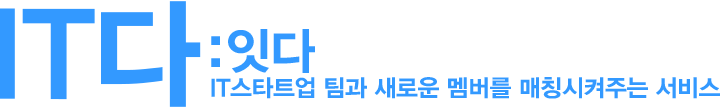
<style>
.page{position:relative;width:720px;height:110px;background:#ffffff}
.page>*{position:absolute;margin:0}
.t1{font:120px "YDYGO300-Bold";letter-spacing:-0.025em;color:#3399ff}
.t2{font:50px "YDYGO300-Bold";letter-spacing:-0.025em;color:#3399ff}
.t3{font:24px "YDYGO300-Bold";letter-spacing:-0.025em;color:#3399ff}
</style>
<div class="page">
<p class="t1" style="left:0px;top:1px;width:201px;height:106px">IT다</p>
<p class="t2" style="left:211px;top:29px;width:104px;height:44px">:잇다</p>
<p class="t3" style="left:211px;top:77px;width:509px;height:22px">IT스타트업 팀과 새로운 멤버를 매칭시켜주는 서비스</p>
</div>
